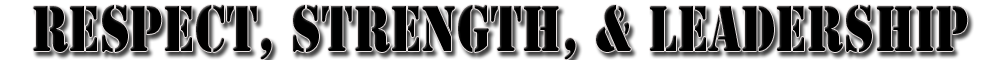
<style>
.page{position:relative;width:1000px;height:60px;background:#ffffff}
.page>*{position:absolute;margin:0}
.t1{font:60px "StencilStd";color:#000000;text-transform:uppercase;scale:0.79 1}
</style>
<div class="page">
<p class="t1" style="left:33px;top:5px;width:935px;height:55px">Respect, strength, &amp; leadership</p>
</div>
